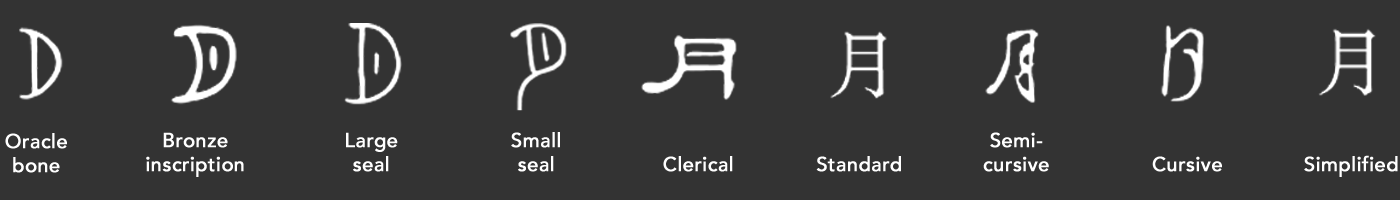
<style>
.page{position:relative;width:1400px;height:200px;background:#333333}
.page>*{position:absolute;margin:0}
.t1{font:20px "Avenir-Medium";color:#ffffff;font-weight:bold}
</style>
<div class="page">
<p class="t1" style="left:5px;top:133px;width:62px;height:40px;text-align:center">Oracle<br>bone</p>
<p class="t1" style="left:146px;top:132px;width:98px;height:45px;text-align:center">Bronze<br>inscription</p>
<p class="t1" style="left:346px;top:132px;width:52px;height:40px;text-align:center">Large<br>seal</p>
<p class="t1" style="left:511px;top:132px;width:49px;height:40px;text-align:center">Small<br>seal</p>
<p class="t1" style="left:983px;top:132px;width:66px;height:40px;text-align:center">Semi-<br>cursive</p>
<p class="t1" style="left:663px;top:156px;width:70px;height:16px">Clerical</p>
<p class="t1" style="left:816px;top:156px;width:85px;height:16px">Standard</p>
<p class="t1" style="left:1152px;top:156px;width:70px;height:16px">Cursive</p>
<p class="t1" style="left:1304px;top:155px;width:94px;height:22px">Simplified</p>
</div>
